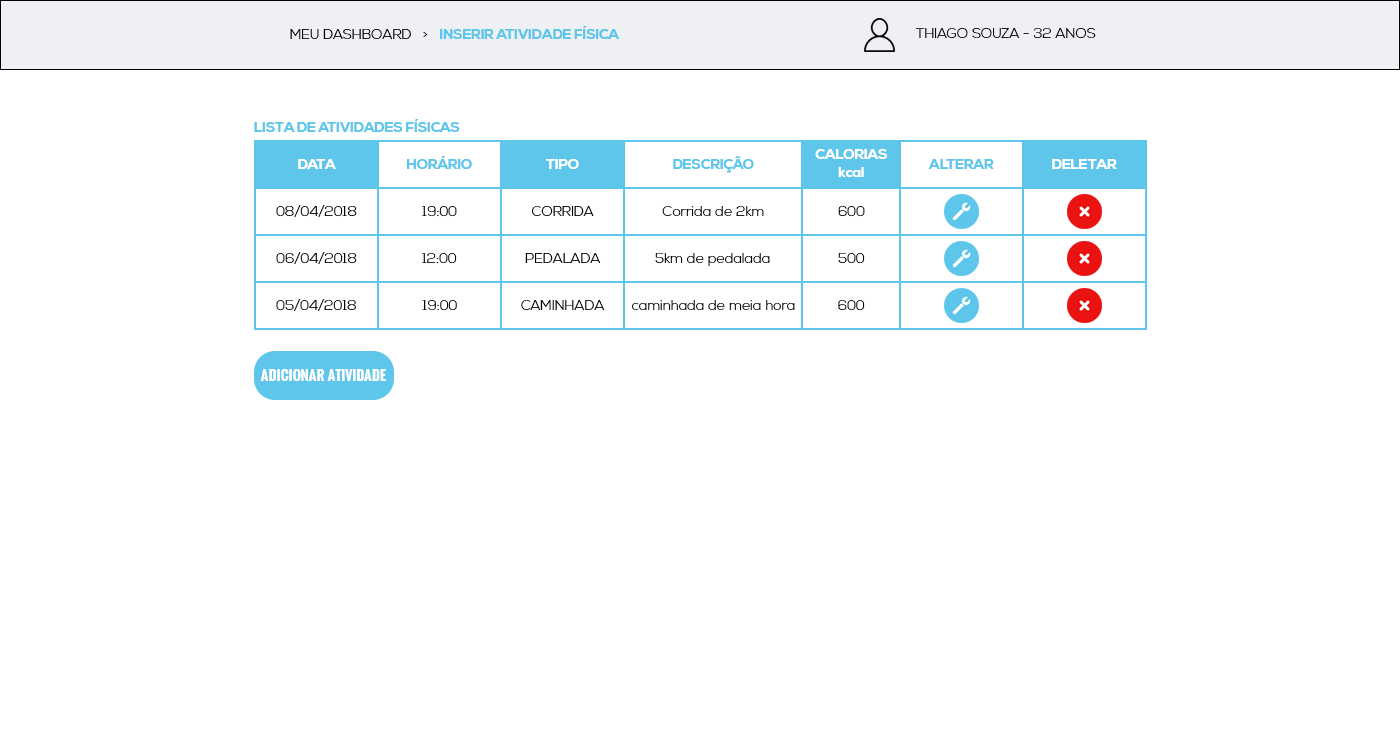
<style>
.page{position:relative;width:1400px;height:741px;background:#ffffff}
.page>*{position:absolute;margin:0}
.t1{font:14px "NexaBold";color:#5dc6ea}
.t2{font:14px "NexaLight";color:#000000}
.t3{font:14px/18px "NexaBold";color:#ffffff}
.t4{font:14px "NexaBold";color:#ffffff}
.t5{font:14px "Oswald-Bold";color:#ffffff}
</style>
<div class="page">
<p class="t1" style="left:290px;top:26px;width:330px;height:13px"><span class="t2">MEU DASHBOARD   &gt;   </span>INSERIR ATIVIDADE FÍSICA</p>
<p class="t2" style="left:915px;top:28px;width:181px;height:10px">THIAGO SOUZA - 32 ANOS</p>
<p class="t1" style="left:254px;top:119px;width:206px;height:13px">LISTA DE ATIVIDADES FÍSICAS</p>
<p class="t3" style="left:815px;top:149px;width:72px;height:28px;text-align:center">CALORIAS<br>kcal</p>
<p class="t4" style="left:298px;top:159px;width:38px;height:10px">DATA</p>
<p class="t1" style="left:407px;top:156px;width:65px;height:13px">HORÁRIO</p>
<p class="t4" style="left:546px;top:159px;width:33px;height:10px">TIPO</p>
<p class="t1" style="left:673px;top:156px;width:81px;height:17px">DESCRIÇÃO</p>
<p class="t1" style="left:928px;top:159px;width:66px;height:10px">ALTERAR</p>
<p class="t4" style="left:1052px;top:159px;width:65px;height:10px">DELETAR</p>
<p class="t2" style="left:276px;top:205px;width:81px;height:12px">08/04/2018</p>
<p class="t2" style="left:422px;top:206px;width:35px;height:11px">19:00</p>
<p class="t2" style="left:532px;top:206px;width:62px;height:10px">CORRIDA</p>
<p class="t2" style="left:662px;top:206px;width:102px;height:10px">Corrida de 2km</p>
<p class="t2" style="left:838px;top:206px;width:27px;height:11px">600</p>
<p class="t2" style="left:276px;top:252px;width:81px;height:12px">06/04/2018</p>
<p class="t2" style="left:422px;top:253px;width:35px;height:11px">12:00</p>
<p class="t2" style="left:525px;top:253px;width:76px;height:10px">PEDALADA</p>
<p class="t2" style="left:655px;top:253px;width:115px;height:13px">5km de pedalada</p>
<p class="t2" style="left:838px;top:253px;width:27px;height:11px">500</p>
<p class="t2" style="left:276px;top:299px;width:80px;height:12px">05/04/2018</p>
<p class="t2" style="left:422px;top:300px;width:35px;height:11px">19:00</p>
<p class="t2" style="left:521px;top:300px;width:84px;height:10px">CAMINHADA</p>
<p class="t2" style="left:632px;top:300px;width:163px;height:10px">caminhada de meia hora</p>
<p class="t2" style="left:838px;top:300px;width:27px;height:11px">600</p>
<p class="t5" style="left:260px;top:369px;width:126px;height:12px">ADICIONAR ATIVIDADE</p>
</div>
